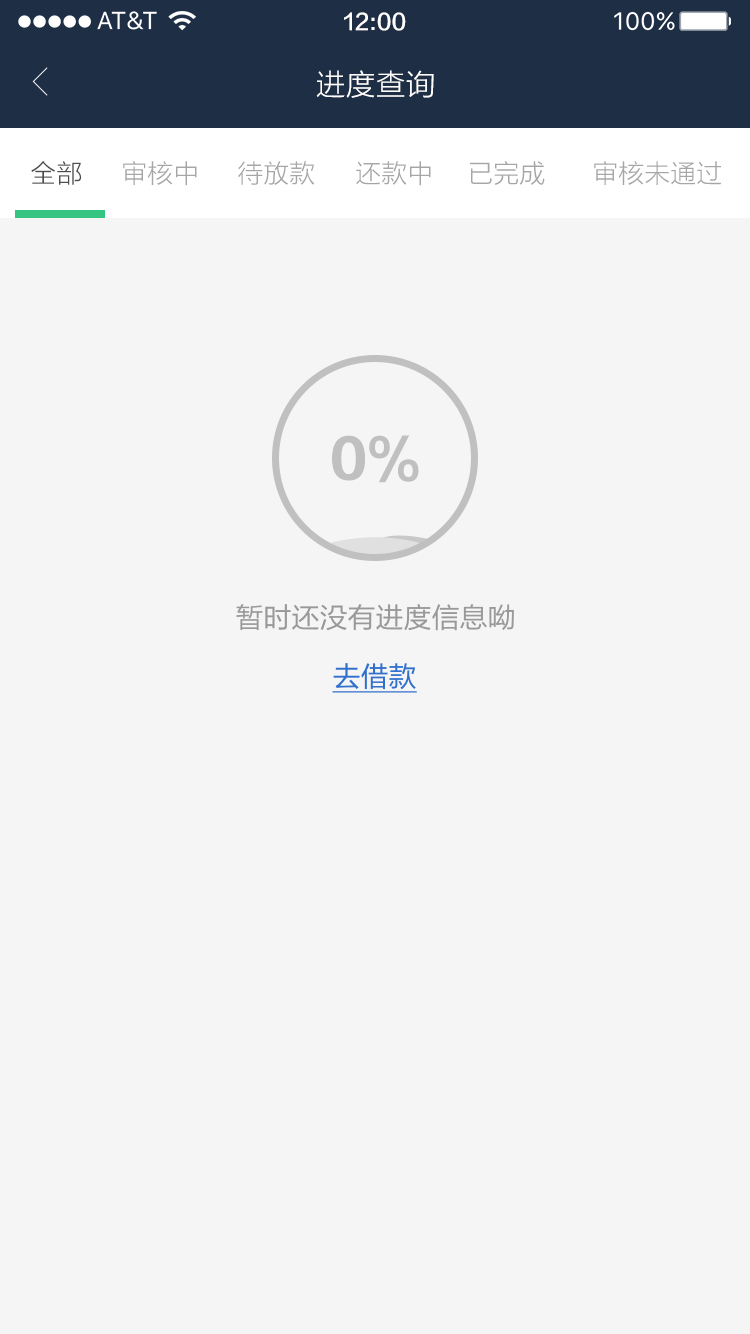
<style>
.page{position:relative;width:750px;height:1334px;background:#f5f5f5}
.page>*{position:absolute;margin:0}
.t1{font:22px "FZLTZHK--GBK1-0";color:#ffffff}
.t2{font:30px "FZLTXHK";color:#ffffff}
.t3{font:26px "FZLTXHK";color:#4d4d4d}
.t4{font:26px "FZLTXHK";color:#a6a6a6}
.t5{font:53.3px "FZLTDHK--GBK1-0";color:#c0c0c0}
.t6{font:28px "FZLTHK--GBK1-0";color:#999999}
.t7{font:28px "FZLTHK--GBK1-0";color:#3170cc;text-decoration:underline}
</style>
<div class="page">
<p class="t1" style="left:344px;top:12px;width:62px;height:19px">12:00</p>
<p class="t2" style="left:316px;top:70px;width:118px;height:28px">进度查询</p>
<p class="t3" style="left:31px;top:161px;width:51px;height:24px">全部</p>
<p class="t4" style="left:123px;top:161px;width:74px;height:25px">审核中</p>
<p class="t4" style="left:238px;top:161px;width:77px;height:24px">待放款</p>
<p class="t4" style="left:356px;top:161px;width:75px;height:25px">还款中</p>
<p class="t4" style="left:470px;top:161px;width:75px;height:24px">已完成</p>
<p class="t4" style="left:594px;top:161px;width:128px;height:24px">审核未通过</p>
<p class="t5" style="left:332px;top:435px;width:87px;height:48px">0%</p>
<p class="t6" style="left:236px;top:604px;width:278px;height:27px">暂时还没有进度信息呦</p>
<p class="t7" style="left:332px;top:663px;width:85px;height:30px">去借款</p>
</div>
